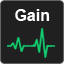
<style>
.page{position:relative;width:64px;height:64px;background:#202020}
.page>*{position:absolute;margin:0}
.t1{font:16px "Arial-BoldMT";color:#ffffff}
</style>
<div class="page">
<p class="t1" style="left:15px;top:9px;width:35px;height:12px">Gain</p>
</div>
